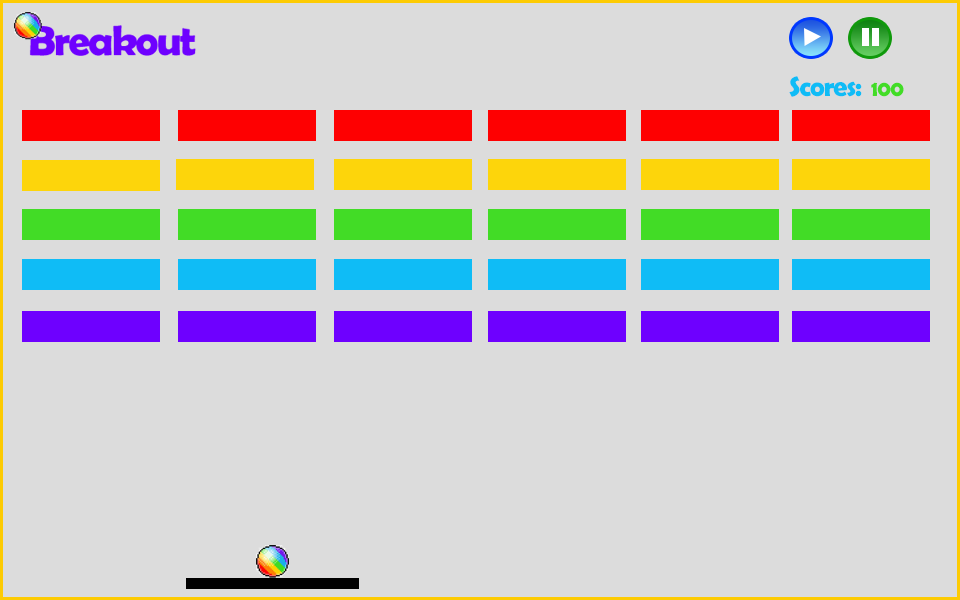
<style>
.page{position:relative;width:960px;height:600px;background:#dcdcdc}
.page>*{position:absolute;margin:0}
.t1{font:28px "BerlinSansFBDemi-Bold";letter-spacing:-0.04em;color:#0fbcf6}
.t2{font:22px "BerlinSansFBDemi-Bold";letter-spacing:-0.04em;color:#42dc26}
</style>
<div class="page">
<p class="t1" style="left:789px;top:76px;width:73px;height:21px">Scores:</p>
<p class="t2" style="left:871px;top:82px;width:33px;height:15px">100</p>
</div>
